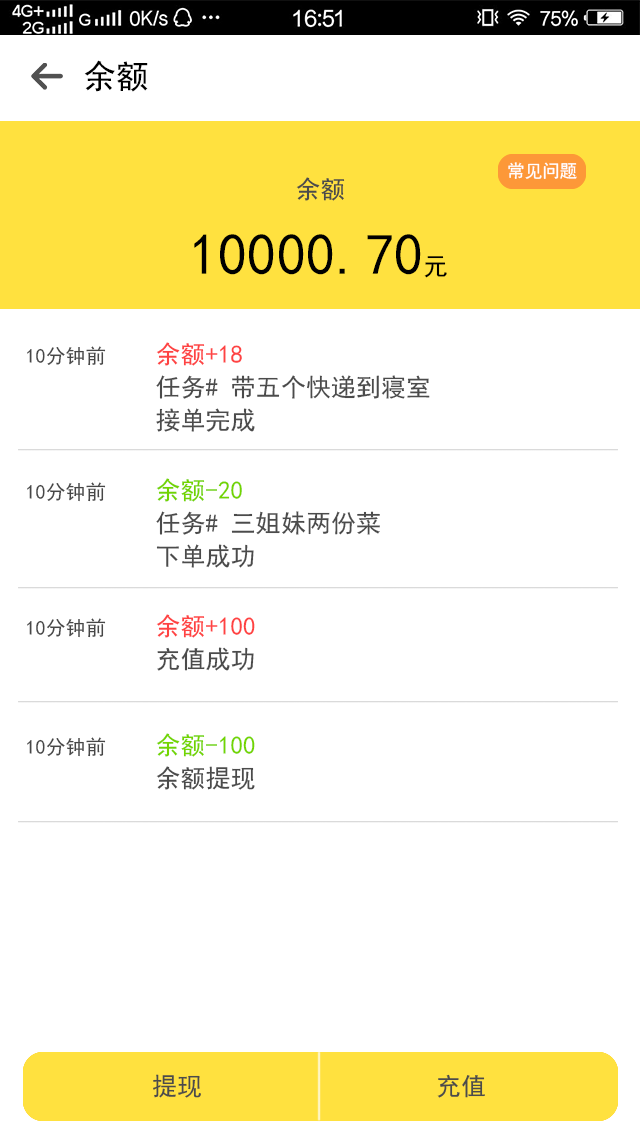
<style>
.page{position:relative;width:640px;height:1136px;background:#ffffff}
.page>*{position:absolute;margin:0}
.t1{font:33.3px "SimHei";letter-spacing:0.002em;color:#000000}
.t2{font:17.8px "SimHei";letter-spacing:0.002em;color:#ffffff}
.t3{font:25px "SimHei";letter-spacing:0.002em;color:#4b4b4b}
.t4{font:58.3px "SimHei";letter-spacing:0.002em;color:#000000}
.t5{font:25px "SimHei";letter-spacing:0.002em;color:#000000}
.t6{font:25px "SimHei";letter-spacing:0.002em;color:#fe4343}
.t7{font:20px "SimHei";letter-spacing:0.002em;color:#474747}
.t8{font:25px/33.1px "SimHei";letter-spacing:0.002em;color:#4b4b4b}
.t9{font:25px "SimHei";letter-spacing:0.002em;color:#73d400}
.t10{font:25px "SimHei";letter-spacing:0.002em;color:#ff4242}
.t11{font:25px "SimHei";letter-spacing:0.002em;color:#73d500}
</style>
<div class="page">
<p class="t1" style="left:84px;top:60px;width:64px;height:32px">余额</p>
<p class="t2" style="left:508px;top:162px;width:69px;height:17px">常见问题</p>
<p class="t3" style="left:296px;top:177px;width:49px;height:24px">余额</p>
<p class="t4" style="left:194px;top:234px;width:253px;height:44px">10000.70<span class="t5">元</span></p>
<p class="t6" style="left:156px;top:342px;width:86px;height:24px">余额+18</p>
<p class="t7" style="left:27px;top:346px;width:79px;height:20px">10分钟前</p>
<p class="t8" style="left:156px;top:375px;width:274px;height:57px">任务# 带五个快递到寝室 <br>接单完成</p>
<p class="t7" style="left:27px;top:482px;width:79px;height:20px">10分钟前</p>
<p class="t9" style="left:156px;top:478px;width:86px;height:24px">余额-20</p>
<p class="t8" style="left:156px;top:511px;width:224px;height:57px">任务# 三姐妹两份菜<br>下单成功</p>
<p class="t10" style="left:156px;top:614px;width:99px;height:24px">余额+100</p>
<p class="t7" style="left:27px;top:618px;width:79px;height:20px">10分钟前</p>
<p class="t3" style="left:157px;top:647px;width:97px;height:24px">充值成功</p>
<p class="t7" style="left:27px;top:737px;width:79px;height:20px">10分钟前</p>
<p class="t11" style="left:156px;top:733px;width:99px;height:24px">余额-100</p>
<p class="t3" style="left:156px;top:766px;width:99px;height:24px">余额提现</p>
<p class="t3" style="left:153px;top:1074px;width:48px;height:24px">提现</p>
<p class="t3" style="left:437px;top:1074px;width:48px;height:24px">充值</p>
</div>
